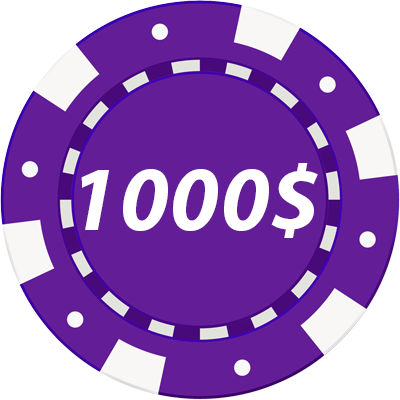
<style>
.page{position:relative;width:400px;height:400px;background:#631d97}
.page>*{position:absolute;margin:0}
.t1{font:91.7px "MyriadPro-BoldIt";letter-spacing:0.01em;color:#ffffff}
</style>
<div class="page">
<p class="t1" style="left:81px;top:163px;width:237px;height:75px">1000$</p>
</div>
